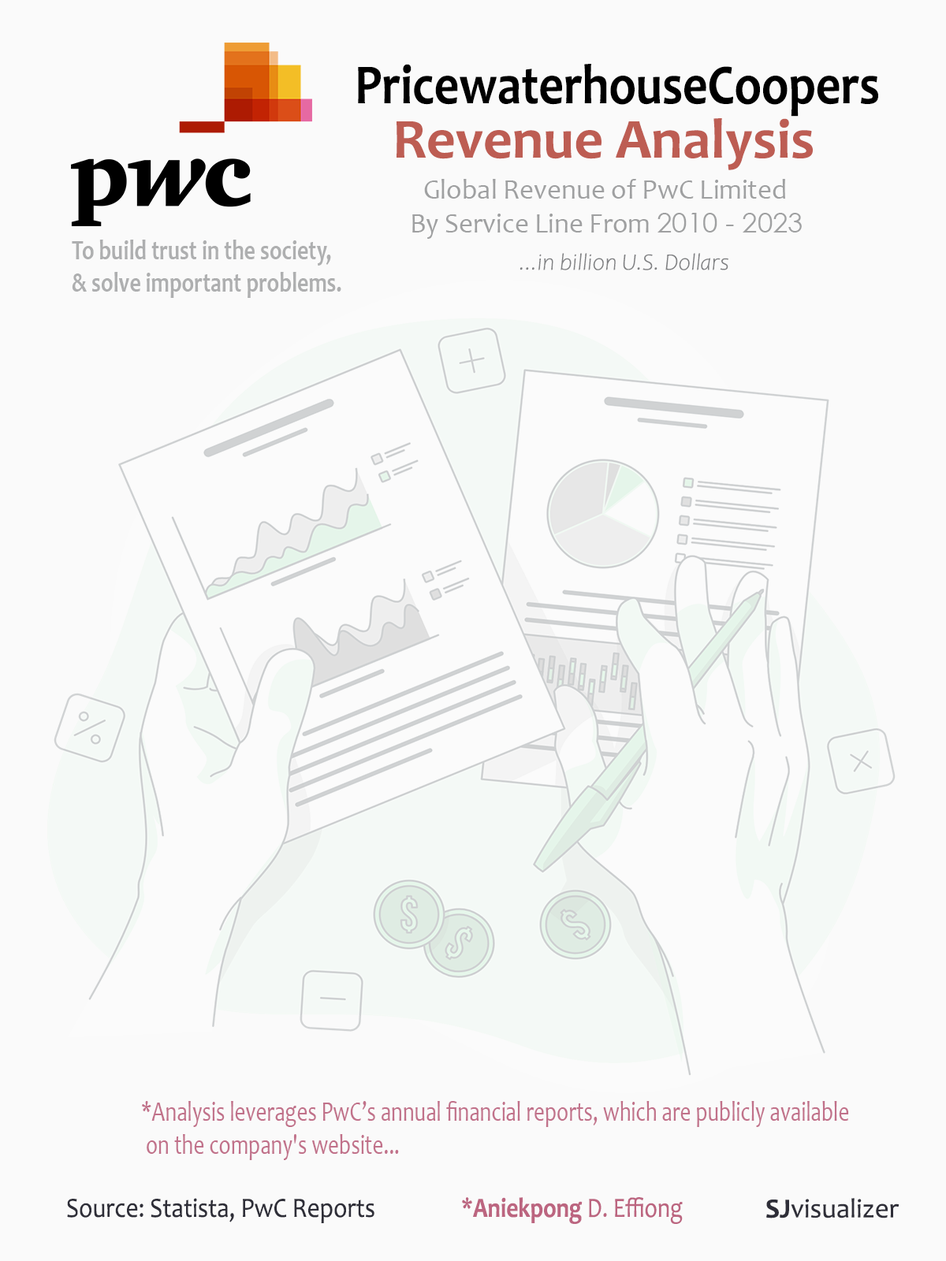
<style>
.page{position:relative;width:946px;height:1261px;background:#fafafa}
.page>*{position:absolute;margin:0}
.t1{font:56.7px "Candara-Bold";color:#000000;scale:0.86 1}
.t2{font:56.7px "Candara-Bold";color:#bd5d53}
.t3{font:27.6px "Candara";color:#9fa0a1}
.t4{font:27.6px "CenturyGothic";color:#9fa0a1}
.t5{font:27.4px "Candara-Bold";color:#aeafb0;scale:0.8 1}
.t6{font:23.6px "Candara-LightItalic";color:#6d6f71}
.t7{font:27.6px "Candara";color:#c1718a;scale:0.78 1}
.t8{font:27.6px "Candara-Bold";color:#c1718a;scale:0.78 1}
.t9{font:27.9px "Candara";color:#2e2e38;scale:0.89 1}
.t10{font:27.9px "Candara";color:#bc6580;scale:0.84 1}
.t11{font:27.9px "Candara-Bold";color:#bc6580;scale:0.84 1}
.t12{font:27.6px "Candara";color:#2e2e38}
.t13{font:27.6px "Candara-Bold";color:#2e2e38}
</style>
<div class="page">
<p class="t1" style="left:358px;top:64px;width:520px;height:53px">PricewaterhouseCoopers</p>
<p class="t2" style="left:396px;top:118px;width:417px;height:52px">Revenue Analysis</p>
<p class="t3" style="left:424px;top:179px;width:361px;height:20px">Global Revenue of PwC Limited</p>
<p class="t3" style="left:412px;top:213px;width:389px;height:26px">By Service Line From <span class="t4">2010 - 2023</span></p>
<p class="t5" style="left:72px;top:240px;width:269px;height:58px">To build trust in the society,<br>&amp; solve important problems.</p>
<p class="t6" style="left:519px;top:253px;width:209px;height:17px">...in billion U.S. Dollars</p>
<p class="t7" style="left:142px;top:1101px;width:707px;height:59px"><span class="t8">*</span>Analysis leverages PwC’s annual financial reports, which are publicly available<br> on the company's website...</p>
<p class="t9" style="left:67px;top:1198px;width:307px;height:25px">Source: Statista, PwC Reports</p>
<p class="t10" style="left:462px;top:1197px;width:220px;height:27px">*<span class="t11">Aniekpong</span> D. Effiong</p>
<p class="t12" style="left:766px;top:1198px;width:133px;height:20px"><span class="t13">SJ</span>visualizer</p>
</div>
